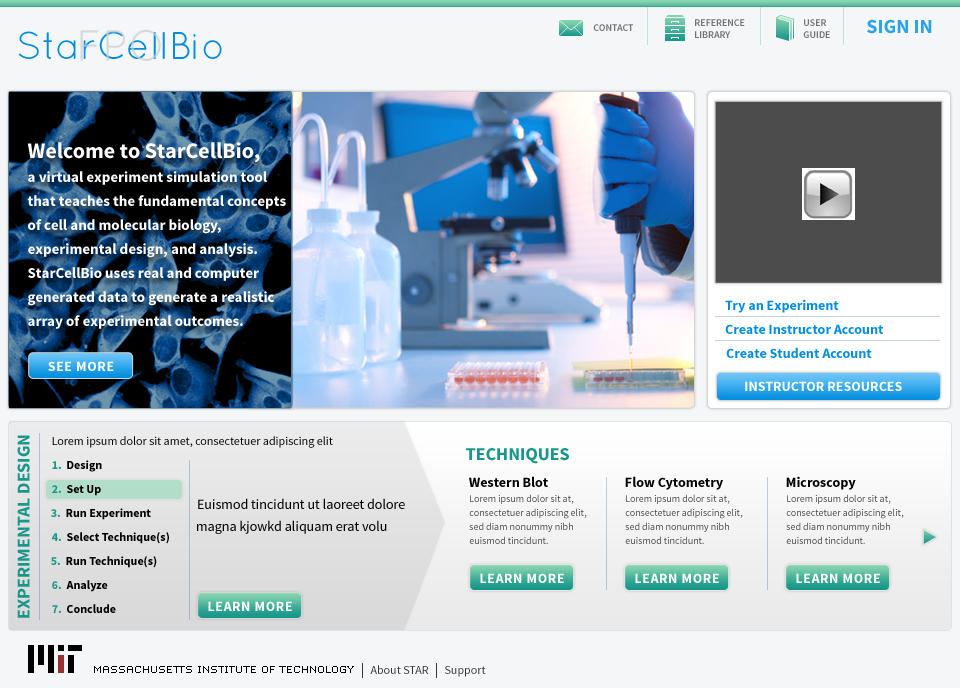
<style>
.page{position:relative;width:960px;height:688px;background:#f5f6f7}
.page>*{position:absolute;margin:0}
.t1{font:43.9px "QuicksandBook-Regular";color:#c7cfd3}
.t2{font:10px "SourceSansPro-Semibold";color:#727272}
.t3{font:20px "SourceSansPro-Bold";color:#2da4e8}
.t4{font:38.5px "QuicksandBook-Regular";color:#008ddd}
.t5{font:15px/24px "SourceSansPro-Bold";color:#ffffff}
.t6{font:22px/24px "SourceSansPro-Bold";color:#ffffff}
.t7{font:14px/24px "SourceSansPro-Bold";color:#008ddd}
.t8{font:14px "SourceSansPro-Bold";letter-spacing:0.04em;color:#ffffff}
.t9{font:14px "SourceSansPro-Bold";color:#ffffff}
.t10{font:12px "Arial-BoldMT";color:#008ddd}
.t11{font:18px "SourceSansPro-Bold";color:#189689}
.t12{font:12px/20px "SourceSansPro-Regular";color:#000000}
.t13{font:12px/24px "SourceSansPro-Bold";color:#189689}
.t14{font:12px/24px "SourceSansPro-Bold";color:#000000}
.t15{font:14px "SourceSansPro-Bold";color:#000000}
.t16{font:10px/14px "SourceSansPro-Regular";color:#464646}
.t17{font:14px/22px "SourceSansPro-Regular";color:#000000}
.t18{font:12px "SourceSansPro-Regular";color:#363636}
</style>
<div class="page">
<p class="t1" style="left:80px;top:29px;width:81px;height:32px;opacity:0.75">FPO</p>
<p class="t2" style="left:593px;top:24px;width:40px;height:7px">CONTACT</p>
<p class="t2" style="left:695px;top:19px;width:50px;height:19px">REFERENCE<br>LIBRARY</p>
<p class="t2" style="left:803px;top:19px;width:27px;height:19px">USER<br>GUIDE</p>
<p class="t3" style="left:867px;top:19px;width:65px;height:15px">SIGN IN</p>
<p class="t4" style="left:18px;top:31px;width:204px;height:28px">StarCellBio</p>
<p class="t5" style="left:27px;top:142px;width:259px;height:187px"><span class="t6">Welcome to StarCellBio, <br></span>a virtual experiment simulation tool that teaches the fundamental concepts of cell and molecular biology, <br>experimental design, and analysis. StarCellBio uses real and computer generated data to generate a realistic array of experimental outcomes.</p>
<p class="t7" style="left:725px;top:299px;width:158px;height:59px">Try an Experiment<br>Create Instructor Account<br>Create Student Account</p>
<p class="t8" style="left:48px;top:361px;width:66px;height:10px">SEE MORE</p>
<p class="t9" style="left:745px;top:381px;width:157px;height:10px"><span class="t10"> </span>INSTRUCTOR RESOURCES</p>
<p class="t11" style="left:17px;top:435px;width:13px;height:183px;rotate:-90deg">EXPERIMENTAL DESIGN</p>
<p class="t12" style="left:51px;top:436px;width:282px;height:177px">Lorem ipsum dolor sit amet, consectetuer adipiscing elit <br><span class="t13">1.</span><span class="t14">  Design<br></span><span class="t13">2.</span><span class="t14">  Set Up<br></span><span class="t13">3.</span><span class="t14">  Run Experiment<br></span><span class="t13">4.</span><span class="t14">  Select Technique(s)<br></span><span class="t13">5.</span><span class="t14">  Run Technique(s)<br></span><span class="t13">6.  </span><span class="t14">Analyze<br></span><span class="t13">7.</span><span class="t14">  Conclude</span></p>
<p class="t11" style="left:466px;top:448px;width:103px;height:16px">TECHNIQUES</p>
<p class="t15" style="left:469px;top:476px;width:79px;height:11px">Western Blot</p>
<p class="t15" style="left:625px;top:476px;width:98px;height:14px">Flow Cytometry</p>
<p class="t15" style="left:786px;top:476px;width:70px;height:14px">Microscopy</p>
<p class="t16" style="left:469px;top:494px;width:118px;height:50px">Lorem ipsum dolor sit at, <br>consectetuer adipiscing elit, <br>sed diam nonummy nibh <br>euismod tincidunt.</p>
<p class="t16" style="left:625px;top:494px;width:118px;height:50px">Lorem ipsum dolor sit at, <br>consectetuer adipiscing elit, <br>sed diam nonummy nibh <br>euismod tincidunt.</p>
<p class="t16" style="left:786px;top:494px;width:118px;height:50px">Lorem ipsum dolor sit at, <br>consectetuer adipiscing elit, <br>sed diam nonummy nibh <br>euismod tincidunt.</p>
<p class="t17" style="left:197px;top:498px;width:208px;height:36px">Euismod tincidunt ut laoreet dolore magna kjowkd aliquam erat volu</p>
<p class="t8" style="left:480px;top:573px;width:84px;height:10px">LEARN MORE</p>
<p class="t8" style="left:635px;top:573px;width:84px;height:10px">LEARN MORE</p>
<p class="t8" style="left:796px;top:573px;width:84px;height:10px">LEARN MORE</p>
<p class="t8" style="left:208px;top:601px;width:84px;height:10px">LEARN MORE</p>
<p class="t18" style="left:370px;top:665px;width:59px;height:9px">About STAR</p>
<p class="t18" style="left:445px;top:666px;width:41px;height:11px">Support</p>
</div>
